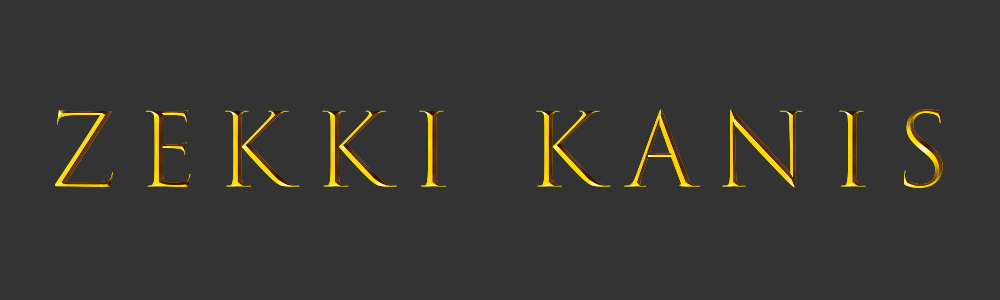
<style>
.page{position:relative;width:1000px;height:300px;background:#333333}
.page>*{position:absolute;margin:0}
.t1{font:100px "TrajanColor-Concept";letter-spacing:0.2em}
</style>
<div class="page">
<p class="t1" style="left:54px;top:109px;width:889px;height:79px">ZEKKI k ANIS</p>
</div>
